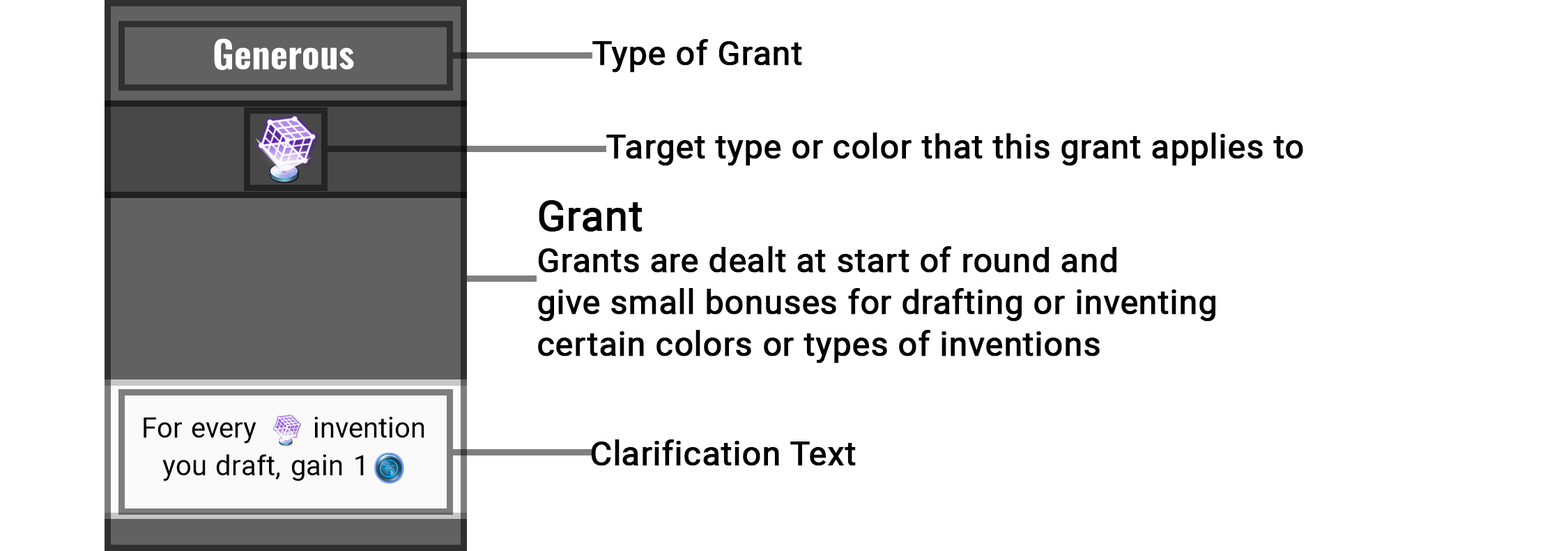
<style>
.page{position:relative;width:1568px;height:551px;background:#ffffff}
.page>*{position:absolute;margin:0}
.t1{font:33.5px "Roboto-Regular";color:#000000;font-weight:bold}
.t2{font:33.5px/41.8px "Roboto-Regular";color:#000000;font-weight:bold}
.t3{font:41.8px/41.8px "Roboto-Regular";color:#000000;font-weight:bold}
</style>
<div class="page">
<p class="t1" style="left:592px;top:39px;width:210px;height:33px">Type of Grant</p>
<p class="t1" style="left:606px;top:132px;width:697px;height:34px">Target type or color that this grant applies to</p>
<p class="t2" style="left:538px;top:200px;width:677px;height:163px"><span class="t3">Grant<br></span>Grants are dealt at start of round and<br>give small bonuses for drafting or inventing<br>certain colors or types of inventions</p>
<p class="t1" style="left:591px;top:439px;width:265px;height:27px">Clarification Text</p>
</div>
